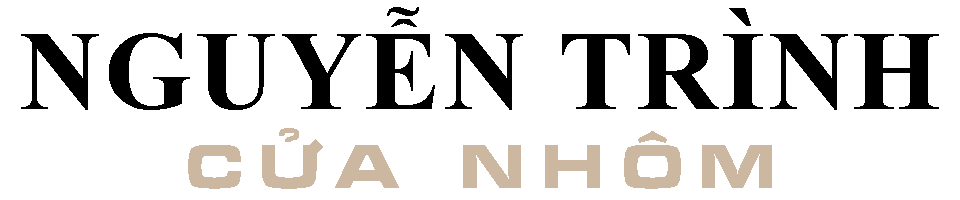
<style>
.page{position:relative;width:960px;height:200px;background:#ffffff}
.page>*{position:absolute;margin:0}
.t1{font:114px "TimesNewRomanPS-BoldMT";letter-spacing:0.02em;color:#000000}
.t2{font:60px "UTM-Micra";letter-spacing:0.2em;color:#ccb8a0}
</style>
<div class="page">
<p class="t1" style="left:21px;top:7px;width:918px;height:103px">NGUYỄN TRÌNH</p>
<p class="t2" style="left:188px;top:128px;width:584px;height:61px">CỬA NHÔM</p>
</div>
